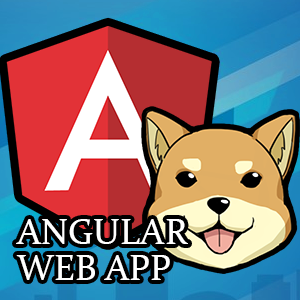
<style>
.page{position:relative;width:300px;height:300px}
.page>*{position:absolute;margin:0}
.t1{font:36px/36px "Constantia";color:#ffffff}
</style>
<div class="page">
<p class="t1" style="left:16px;top:219px;width:172px;height:61px">ANGULAR<br>WEB APP</p>
</div>
